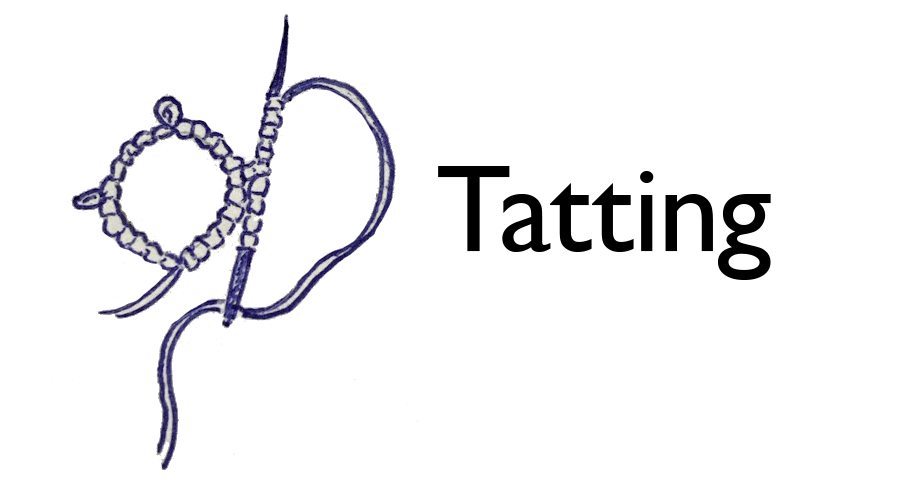
<style>
.page{position:relative;width:900px;height:500px;background:#ffffff}
.page>*{position:absolute;margin:0}
.t1{font:125px "GillSans";color:#000000}
</style>
<div class="page">
<p class="t1" style="left:438px;top:166px;width:333px;height:114px">Tatting</p>
</div>
